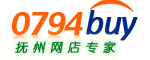
<style>
.page{position:relative;width:150px;height:60px;background:#ffffff}
.page>*{position:absolute;margin:0}
.t1{font:50px "LilyUPC";letter-spacing:-0.05em;color:#ff5f04;font-style:italic;scale:0.9 1}
.t2{font:36px "Calibri-Italic";letter-spacing:-0.05em;color:#012989;font-weight:bold}
.t3{font:12px "YouYuan";letter-spacing:-0.05em;color:#017912;font-weight:bold;font-style:italic}
</style>
<div class="page">
<p class="t1" style="left:11px;top:12px;width:72px;height:23px">0794</p>
<p class="t2" style="left:86px;top:10px;width:52px;height:31px">buy</p>
<p class="t3" style="left:15px;top:41px;width:101px;height:13px">抚 州 网 店 专 家</p>
</div>
